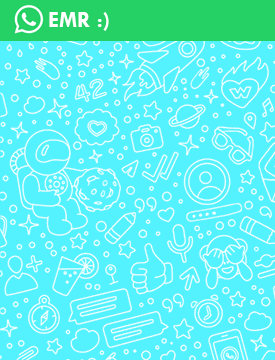
<style>
.page{position:relative;width:275px;height:360px;background:#54f1ff}
.page>*{position:absolute;margin:0}
.t1{font:23px "TwCenMT-Bold";color:#ffffff}
</style>
<div class="page">
<p class="t1" style="left:49px;top:12px;width:60px;height:19px">EMR :)</p>
</div>
